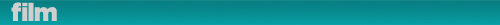
<style>
.page{position:relative;width:500px;height:25px}
.page>*{position:absolute;margin:0}
.t1{font:25px "GothamBlack";letter-spacing:-0.05em;color:#cfcfcf}
</style>
<div class="page">
<p class="t1" style="left:11px;top:2px;width:46px;height:19px">film</p>
</div>
